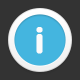
<style>
.page{position:relative;width:80px;height:80px;background:#333333}
.page>*{position:absolute;margin:0}
.t1{font:37px "ArialRoundedMTBold";color:#fbfbfb;font-weight:bold}
</style>
<div class="page">
<p class="t1" style="left:36px;top:27px;width:7px;height:27px">i</p>
</div>
